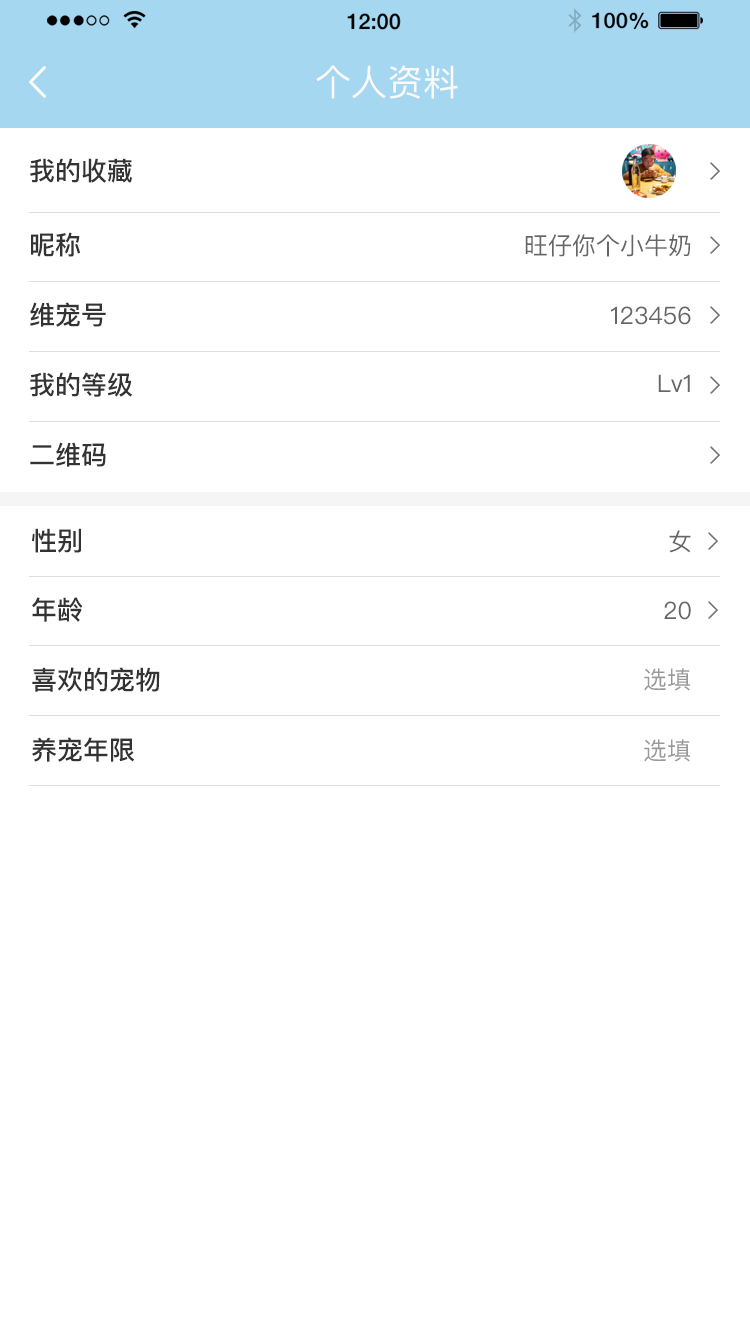
<style>
.page{position:relative;width:750px;height:1334px;background:#ffffff}
.page>*{position:absolute;margin:0}
.t1{font:36px "PingFangSC-Regular";color:#fcf9f9}
.t2{font:26px "PingFangSC-Medium";color:#333333}
.t3{font:24px "PingFangSC-Regular";color:#666666}
.t4{font:24px "PingFangSC-Regular";color:#999999}
</style>
<div class="page">
<p class="t1" style="left:316px;top:65px;width:142px;height:34px">个人资料</p>
<p class="t2" style="left:30px;top:158px;width:102px;height:25px">我的收藏</p>
<p class="t2" style="left:31px;top:232px;width:50px;height:25px">昵称</p>
<p class="t3" style="left:525px;top:234px;width:166px;height:23px">旺仔你个小牛奶</p>
<p class="t2" style="left:30px;top:302px;width:76px;height:25px">维宠号</p>
<p class="t3" style="left:611px;top:306px;width:80px;height:19px">123456</p>
<p class="t2" style="left:30px;top:372px;width:103px;height:25px">我的等级</p>
<p class="t3" style="left:658px;top:374px;width:32px;height:18px">Lv1</p>
<p class="t2" style="left:30px;top:442px;width:76px;height:25px">二维码</p>
<p class="t2" style="left:31px;top:528px;width:50px;height:25px">性别</p>
<p class="t3" style="left:669px;top:530px;width:22px;height:23px">女</p>
<p class="t2" style="left:32px;top:597px;width:51px;height:25px">年龄</p>
<p class="t3" style="left:664px;top:601px;width:27px;height:19px">20</p>
<p class="t2" style="left:32px;top:667px;width:128px;height:25px">喜欢的宠物</p>
<p class="t4" style="left:644px;top:668px;width:46px;height:23px">选填</p>
<p class="t2" style="left:32px;top:737px;width:103px;height:25px">养宠年限</p>
<p class="t4" style="left:644px;top:739px;width:46px;height:23px">选填</p>
</div>
